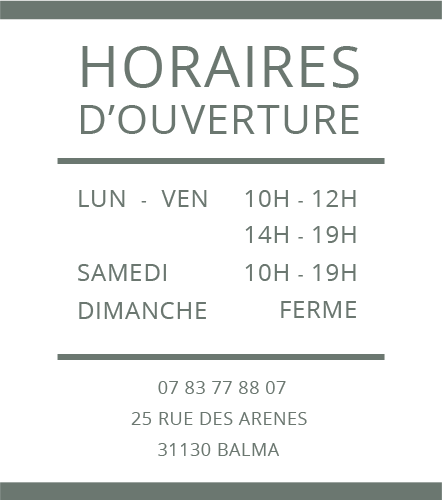
<style>
.page{position:relative;width:442px;height:500px;background:#ffffff}
.page>*{position:absolute;margin:0}
.t1{font:41px/46.6px "OpenSans-Regular";letter-spacing:0.03em;color:#6b7770}
.t2{font:57px/46.6px "OpenSans-Regular";letter-spacing:0.03em;color:#6b7770}
.t3{font:24px "OpenSans-Regular";letter-spacing:0.03em;color:#6b7770}
.t4{font:18px "OpenSans-Regular";letter-spacing:0.03em;color:#6b7770}
</style>
<div class="page">
<p class="t1" style="left:81px;top:46px;width:278px;height:88px"><span class="t2">HORAIRES<br></span>D’OUVERTURE</p>
<p class="t3" style="left:79px;top:190px;width:128px;height:17px">LUN  <span class="t4">-</span>  VEN</p>
<p class="t3" style="left:245px;top:190px;width:111px;height:17px">10H <span class="t4">-</span> 12H</p>
<p class="t3" style="left:245px;top:226px;width:111px;height:17px">14H <span class="t4">-</span> 19H</p>
<p class="t3" style="left:78px;top:264px;width:88px;height:17px">SAMEDI</p>
<p class="t3" style="left:245px;top:264px;width:111px;height:17px">10H <span class="t4">-</span> 19H</p>
<p class="t3" style="left:79px;top:302px;width:127px;height:17px">DIMANCHE</p>
<p class="t3" style="left:281px;top:301px;width:75px;height:17px">FERME</p>
<p class="t4" style="left:158px;top:381px;width:128px;height:13px">07 83 77 88 07</p>
<p class="t4" style="left:131px;top:412px;width:176px;height:13px">25 RUE DES ARENES</p>
<p class="t4" style="left:158px;top:443px;width:121px;height:13px">31130 BALMA</p>
</div>
